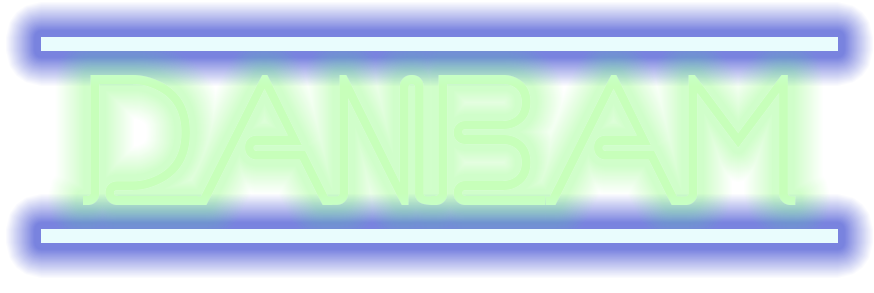
<style>
.page{position:relative;width:874px;height:293px}
.page>*{position:absolute;margin:0}
.t1{font:161.9px "Neon";color:#c7ffba}
</style>
<div class="page">
<p class="t1" style="left:83px;top:75px;width:713px;height:130px">DANBAM</p>
</div>
